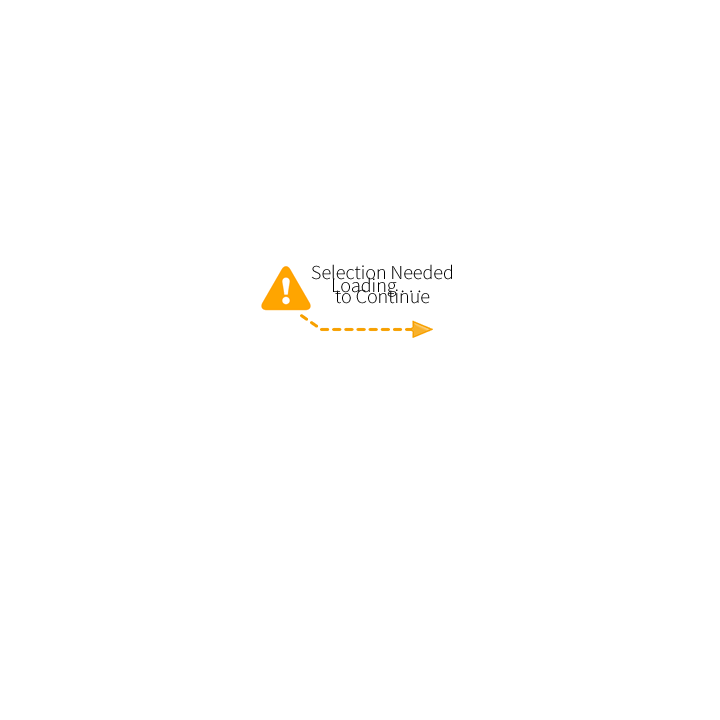
<style>
.page{position:relative;width:720px;height:720px;background:#ffffff}
.page>*{position:absolute;margin:0}
.t1{font:20px "SourceSansPro-Light";color:#000000}
</style>
<div class="page">
<p class="t1" style="left:311px;top:264px;width:141px;height:40px;text-align:center">Selection Needed<br>to Continue</p>
<p class="t1" style="left:333px;top:277px;width:88px;height:20px">Loading . . .</p>
</div>
